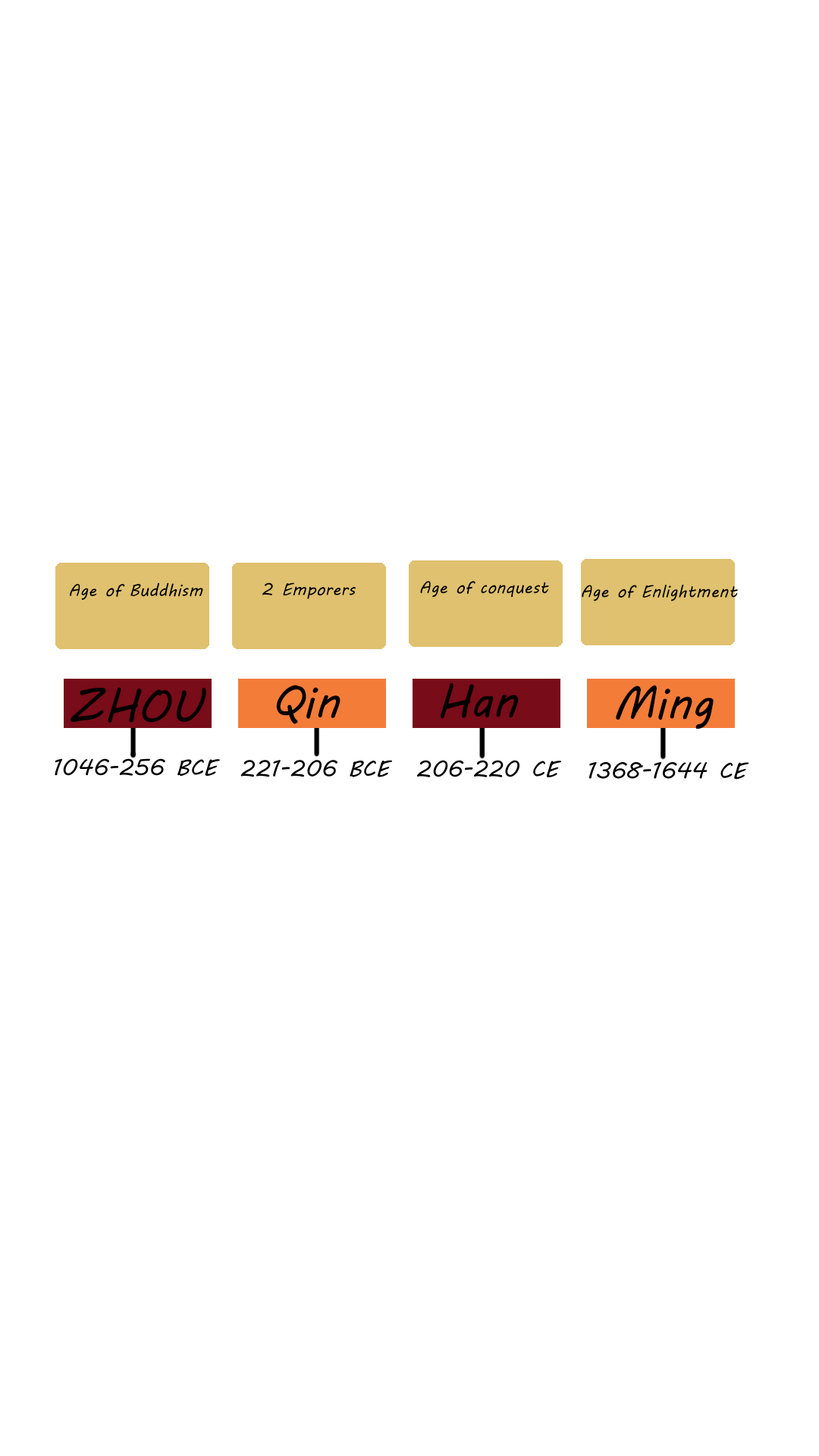
<style>
.page{position:relative;width:819px;height:1456px;background:#ffffff}
.page>*{position:absolute;margin:0}
.t1{font:17.1px "MVBoli";color:#000000}
.t2{font:45.5px "MVBoli";color:#000000}
.t3{font:22.7px "MVBoli";color:#000000}
</style>
<div class="page">
<p class="t1" style="left:420px;top:581px;width:129px;height:17px">Age of conquest</p>
<p class="t1" style="left:70px;top:582px;width:133px;height:18px">Age of Buddhism</p>
<p class="t1" style="left:262px;top:582px;width:94px;height:17px">2 Emporers</p>
<p class="t1" style="left:582px;top:585px;width:156px;height:16px">Age of Enlightment</p>
<p class="t2" style="left:71px;top:687px;width:135px;height:36px">ZHOU</p>
<p class="t2" style="left:276px;top:685px;width:64px;height:39px">Qin</p>
<p class="t2" style="left:441px;top:682px;width:78px;height:37px">Han</p>
<p class="t2" style="left:616px;top:685px;width:98px;height:44px">Ming</p>
<p class="t3" style="left:240px;top:760px;width:152px;height:17px">221-206 BCE</p>
<p class="t3" style="left:417px;top:760px;width:144px;height:17px">206-220 CE</p>
<p class="t3" style="left:589px;top:762px;width:160px;height:18px">1368-1644 CE</p>
</div>
